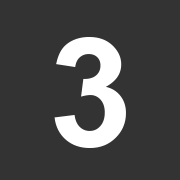
<style>
.page{position:relative;width:180px;height:180px;background:#333333}
.page>*{position:absolute;margin:0}
.t1{font:150px "Arial-BoldMT";color:#ffffff}
</style>
<div class="page">
<p class="t1" style="left:54px;top:37px;width:72px;height:111px">3</p>
</div>
